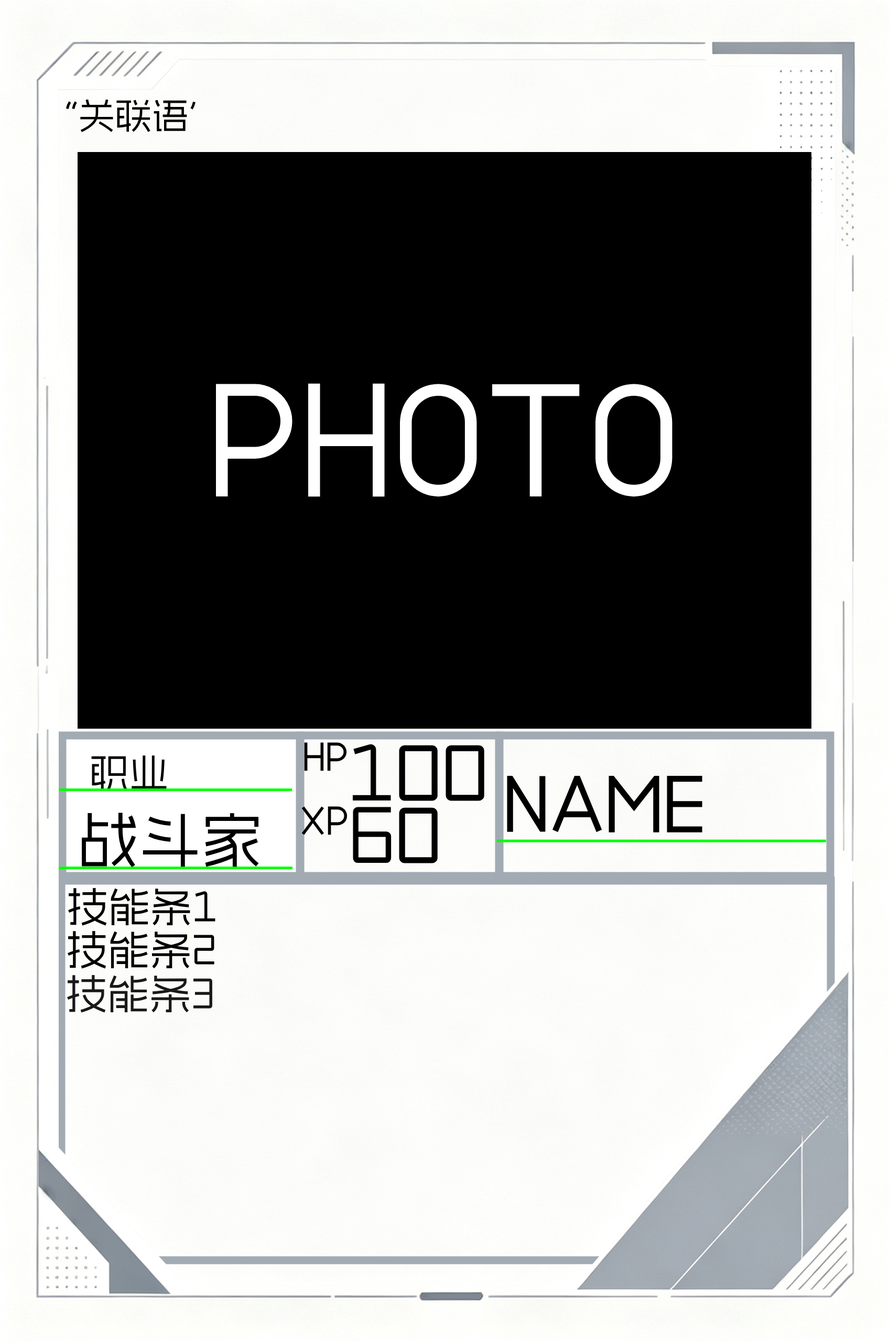
<style>
.page{position:relative;width:889px;height:1342px;background:#000000}
.page>*{position:absolute;margin:0}
.t1{font:36.7px "AidianFengYaHei";color:#000000}
.t2{font:39.3px "AidianFengYaHei";color:#000000}
.t3{font:78.6px "AidianFengYaHei";color:#000000}
.t4{font:61.8px "AidianFengYaHei";color:#000000}
.t5{font:41.9px "AidianFengYaHei";color:#000000}
.t6{font:41.9px "AidianFengYaHei";color:#191919}
</style>
<div class="page">
<p class="t1" style="left:66px;top:99px;width:129px;height:33px">“关联语'</p>
<p class="t2" style="left:304px;top:742px;width:43px;height:29px">HP</p>
<p class="t3" style="left:353px;top:743px;width:131px;height:58px">100</p>
<p class="t2" style="left:91px;top:755px;width:76px;height:35px">职业</p>
<p class="t3" style="left:507px;top:775px;width:195px;height:57px">NAME</p>
<p class="t2" style="left:301px;top:806px;width:46px;height:29px">XP</p>
<p class="t3" style="left:353px;top:807px;width:85px;height:56px">60</p>
<p class="t4" style="left:82px;top:812px;width:177px;height:56px">战斗家</p>
<p class="t5" style="left:68px;top:887px;width:147px;height:38px">技能条1</p>
<p class="t5" style="left:68px;top:930px;width:146px;height:38px">技能条2</p>
<p class="t6" style="left:67px;top:974px;width:145px;height:38px">技能条3</p>
</div>
